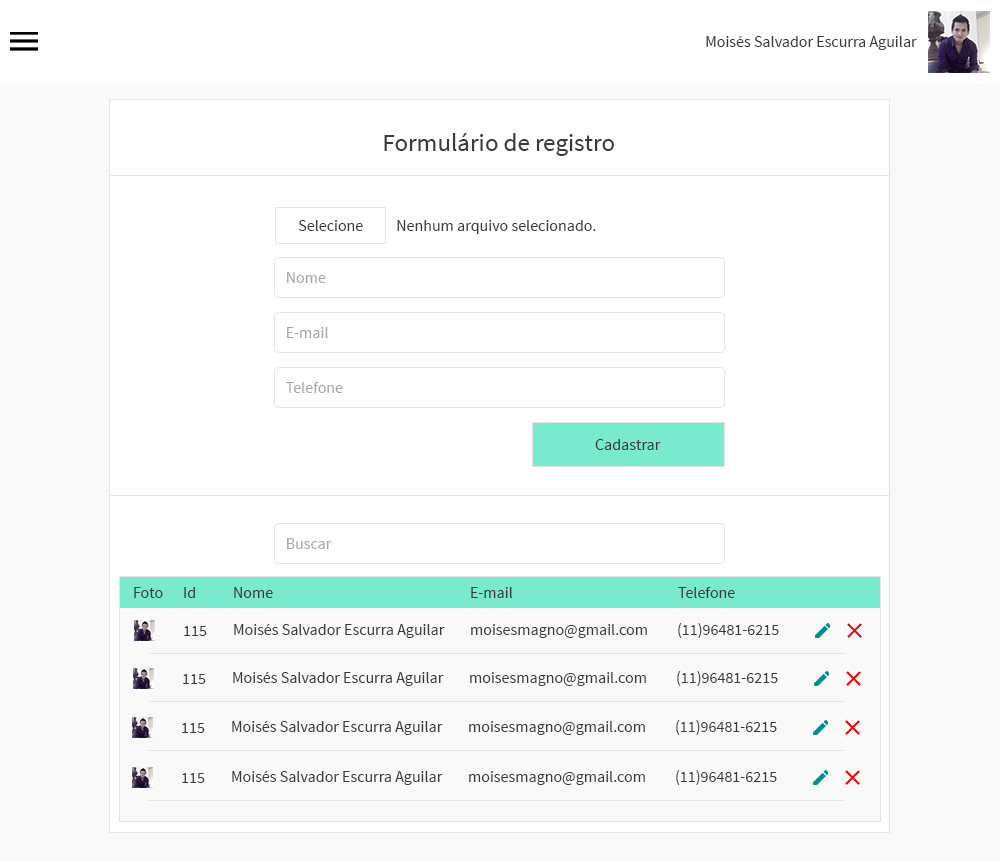
<style>
.page{position:relative;width:1000px;height:861px;background:#ffffff}
.page>*{position:absolute;margin:0}
.t1{font:16px "SourceSansPro-Regular";color:#3a3a3a}
.t2{font:25px "SourceSansPro-Regular";color:#3a3a3a}
.t3{font:16px "SourceSansPro-Regular";color:#a7a6a6}
.t4{font:15.6px "SourceSansPro-Regular";color:#3a3a3a}
</style>
<div class="page">
<p class="t1" style="left:706px;top:36px;width:211px;height:14px">Moisés Salvador Escurra Aguilar</p>
<p class="t2" style="left:384px;top:133px;width:230px;height:23px">Formulário de registro</p>
<p class="t1" style="left:298px;top:220px;width:65px;height:11px">Selecione</p>
<p class="t1" style="left:397px;top:220px;width:199px;height:14px">Nenhum arquivo selecionado.</p>
<p class="t3" style="left:287px;top:272px;width:39px;height:11px">Nome</p>
<p class="t3" style="left:287px;top:327px;width:41px;height:11px">E-mail</p>
<p class="t3" style="left:286px;top:382px;width:57px;height:11px">Telefone</p>
<p class="t1" style="left:595px;top:439px;width:66px;height:11px">Cadastrar</p>
<p class="t3" style="left:287px;top:538px;width:45px;height:11px">Buscar</p>
<p class="t4" style="left:134px;top:587px;width:29px;height:11px">Foto</p>
<p class="t4" style="left:184px;top:587px;width:11px;height:11px">Id</p>
<p class="t4" style="left:234px;top:587px;width:39px;height:11px">Nome</p>
<p class="t4" style="left:471px;top:587px;width:42px;height:11px">E-mail</p>
<p class="t4" style="left:678px;top:587px;width:57px;height:11px">Telefone</p>
<p class="t4" style="left:184px;top:626px;width:23px;height:10px">115</p>
<p class="t4" style="left:234px;top:624px;width:211px;height:14px">Moisés Salvador Escurra Aguilar</p>
<p class="t4" style="left:471px;top:624px;width:176px;height:14px">moisesmagno@gmail.com</p>
<p class="t4" style="left:678px;top:623px;width:101px;height:15px">(11)96481-6215</p>
<p class="t4" style="left:183px;top:674px;width:23px;height:10px">115</p>
<p class="t4" style="left:233px;top:672px;width:211px;height:14px">Moisés Salvador Escurra Aguilar</p>
<p class="t4" style="left:470px;top:672px;width:176px;height:14px">moisesmagno@gmail.com</p>
<p class="t4" style="left:677px;top:671px;width:101px;height:15px">(11)96481-6215</p>
<p class="t4" style="left:182px;top:723px;width:23px;height:10px">115</p>
<p class="t4" style="left:232px;top:721px;width:211px;height:14px">Moisés Salvador Escurra Aguilar</p>
<p class="t4" style="left:469px;top:721px;width:176px;height:14px">moisesmagno@gmail.com</p>
<p class="t4" style="left:676px;top:720px;width:101px;height:15px">(11)96481-6215</p>
<p class="t4" style="left:182px;top:773px;width:23px;height:10px">115</p>
<p class="t4" style="left:232px;top:771px;width:211px;height:14px">Moisés Salvador Escurra Aguilar</p>
<p class="t4" style="left:469px;top:771px;width:176px;height:14px">moisesmagno@gmail.com</p>
<p class="t4" style="left:676px;top:770px;width:101px;height:15px">(11)96481-6215</p>
</div>
